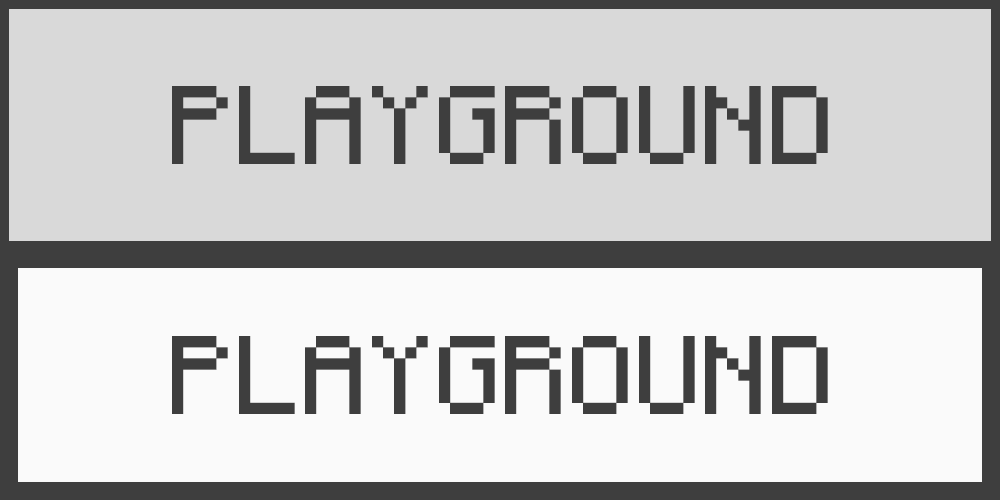
<style>
.page{position:relative;width:1000px;height:500px;background:#d9d9d9}
.page>*{position:absolute;margin:0}
.t1{font:100px "Monocraft";color:#3e3e3e}
</style>
<div class="page">
<p class="t1" style="left:172px;top:86px;width:656px;height:78px">PLAYGROUND</p>
<p class="t1" style="left:172px;top:336px;width:656px;height:78px">PLAYGROUND</p>
</div>
